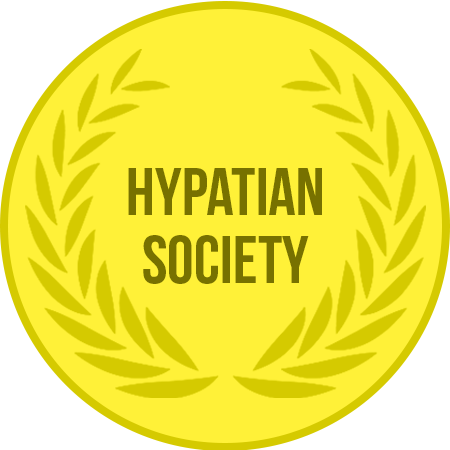
<style>
.page{position:relative;width:450px;height:450px;background:#fff138}
.page>*{position:absolute;margin:0}
.t1{font:67.7px/67.9px "BebasNeueBold";color:#777100}
</style>
<div class="page">
<p class="t1" style="left:128px;top:168px;width:194px;height:116px;text-align:center">hypatian<br>society</p>
</div>
